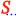
<style>
.page{position:relative;width:16px;height:16px;background:#ffffff}
.page>*{position:absolute;margin:0}
.t1{font:18.7px "FangSong_GB2312";color:#ff1e00;text-transform:uppercase;font-weight:bold;font-style:italic}
.t2{font:8px "FangSong_GB2312";color:#0600ff;text-transform:uppercase;font-weight:bold;font-style:italic}
</style>
<div class="page">
<p class="t1" style="left:1px;top:0px;width:10px;height:14px">S</p>
<p class="t2" style="left:6px;top:13px;width:11px;height:3px">...</p>
</div>
